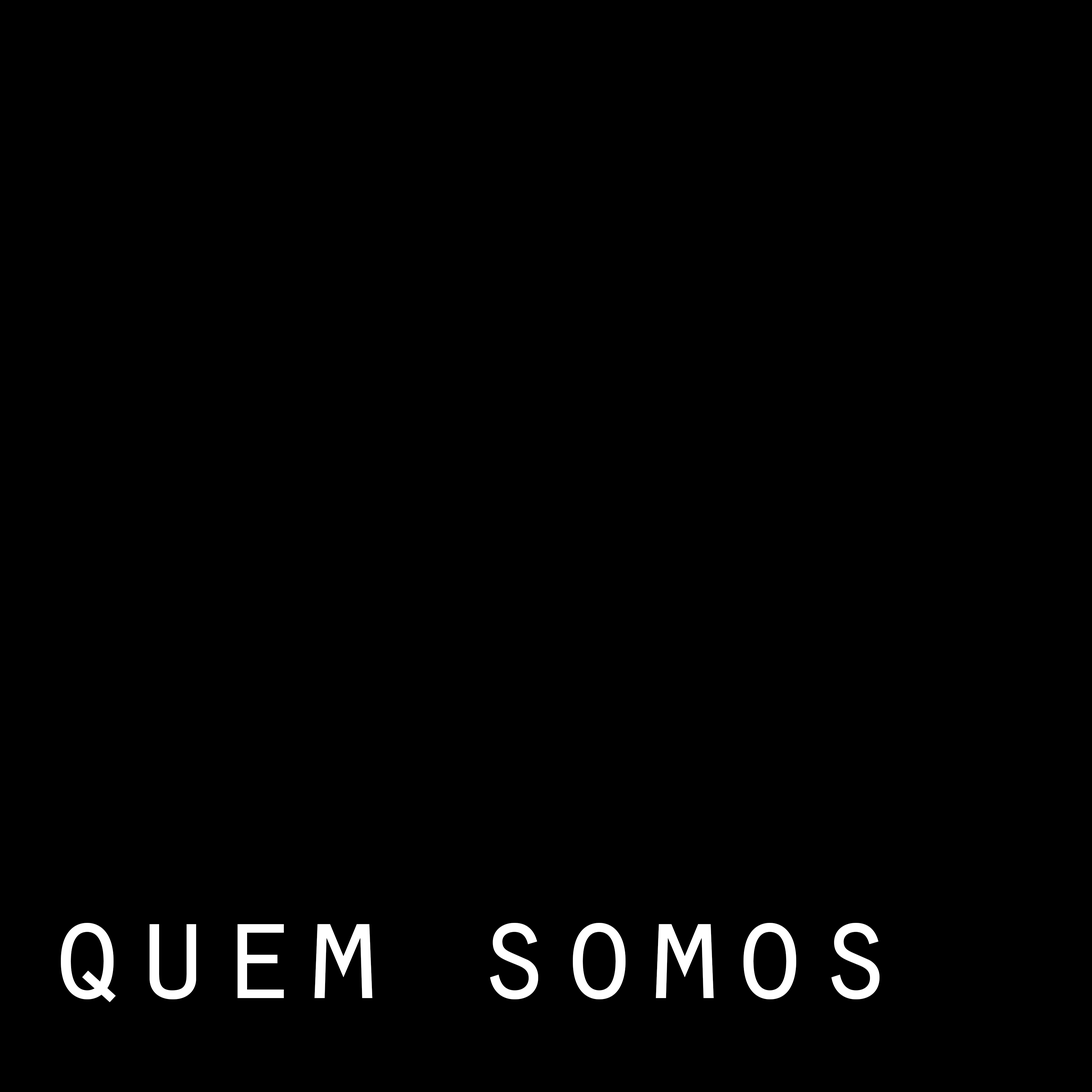
<style>
.page{position:relative;width:1092px;height:1092px;background:#000000}
.page>*{position:absolute;margin:0}
.t1{font:142.2px "OratorStd";color:#ffffff}
</style>
<div class="page">
<p class="t1" style="left:61px;top:923px;width:819px;height:79px">quem somos</p>
</div>
